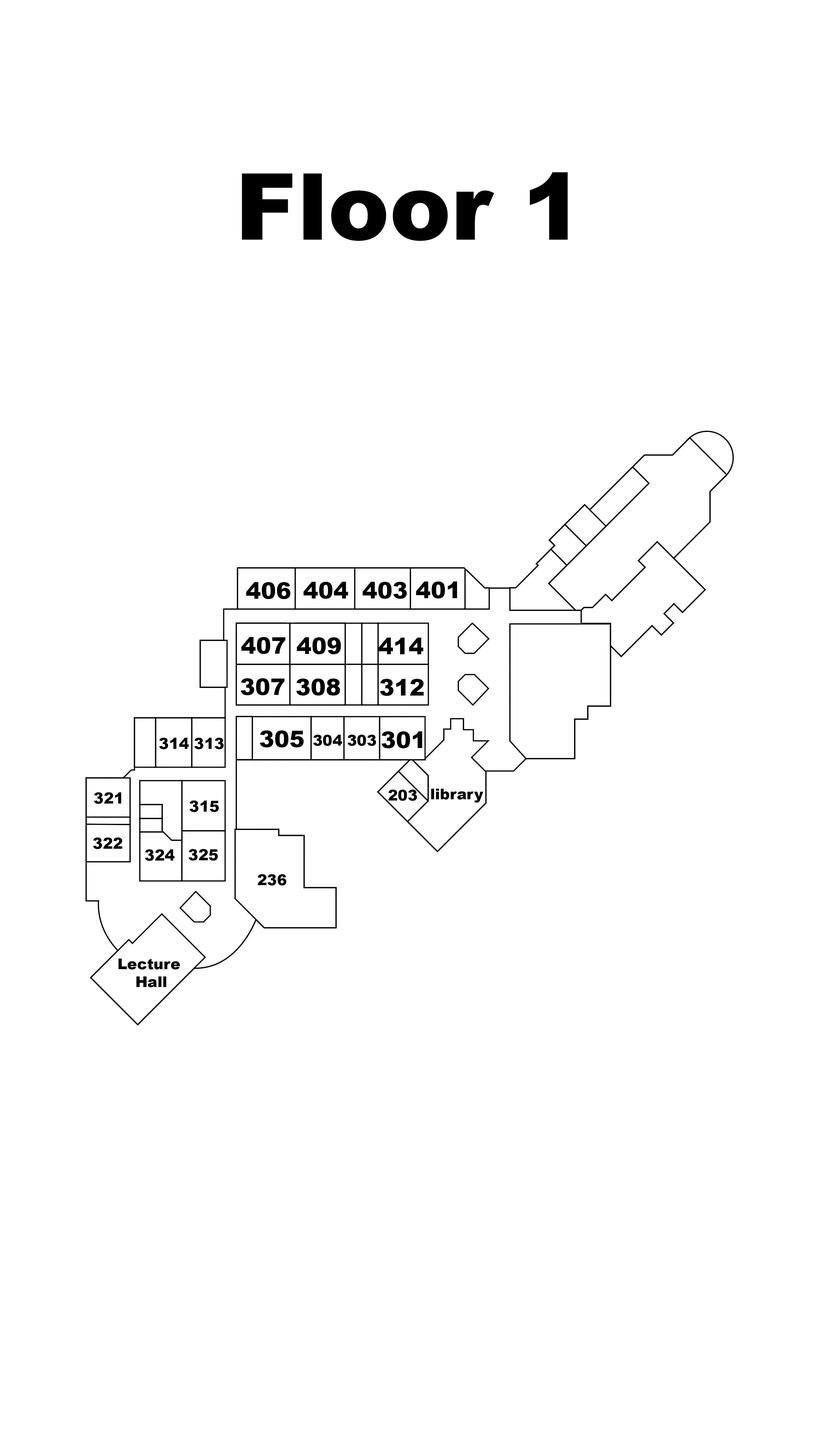
<style>
.page{position:relative;width:819px;height:1456px;background:#ffffff}
.page>*{position:absolute;margin:0}
.t1{font:22.7px "Arial-Black";color:#000000}
.t2{font:15.1px "Arial-Black";color:#000000}
.t3{font:14.9px "Arial-Black";color:#000000}
</style>
<div class="page">
<p class="t1" style="left:303px;top:582px;width:45px;height:17px">404</p>
<p class="t1" style="left:362px;top:582px;width:45px;height:17px">403</p>
<p class="t1" style="left:416px;top:581px;width:41px;height:17px">401</p>
<p class="t1" style="left:246px;top:582px;width:45px;height:17px">406</p>
<p class="t1" style="left:241px;top:637px;width:44px;height:17px">407</p>
<p class="t1" style="left:297px;top:637px;width:44px;height:17px">409</p>
<p class="t1" style="left:379px;top:638px;width:44px;height:16px">414</p>
<p class="t1" style="left:241px;top:678px;width:44px;height:17px">307</p>
<p class="t1" style="left:296px;top:679px;width:44px;height:17px">308</p>
<p class="t1" style="left:380px;top:679px;width:44px;height:17px">312</p>
<p class="t2" style="left:159px;top:738px;width:30px;height:11px">314</p>
<p class="t2" style="left:194px;top:738px;width:30px;height:11px">313</p>
<p class="t1" style="left:260px;top:730px;width:44px;height:17px">305</p>
<p class="t3" style="left:313px;top:735px;width:29px;height:11px">304</p>
<p class="t3" style="left:347px;top:735px;width:29px;height:11px">303</p>
<p class="t1" style="left:381px;top:731px;width:41px;height:17px">301</p>
<p class="t2" style="left:94px;top:792px;width:27px;height:12px">321</p>
<p class="t3" style="left:388px;top:790px;width:29px;height:11px">203</p>
<p class="t3" style="left:431px;top:789px;width:52px;height:14px">library</p>
<p class="t2" style="left:189px;top:800px;width:30px;height:12px">315</p>
<p class="t2" style="left:93px;top:837px;width:30px;height:12px">322</p>
<p class="t2" style="left:145px;top:849px;width:30px;height:12px">324</p>
<p class="t2" style="left:188px;top:849px;width:30px;height:12px">325</p>
<p class="t3" style="left:258px;top:874px;width:28px;height:11px">236</p>
<p class="t3" style="left:118px;top:959px;width:62px;height:28px;text-align:center">Lecture <br>Hall</p>
</div>
